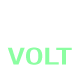
<style>
.page{position:relative;width:80px;height:80px;background:#ffffff}
.page>*{position:absolute;margin:0}
.t1{font:23.4px "HelveticaNeueLTStd-MdCn";color:#8bfea1;scale:1.47 1}
.t2{font:29.1px "HelveticaNeueLTStd-MdCn";color:#ffffff;scale:1.47 1}
</style>
<div class="page">
<p class="t1" style="left:7px;top:8px;width:65px;height:57px;text-align:center"><span class="t2">ESS<br></span>VOLT</p>
</div>
